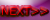
<style>
.page{position:relative;width:50px;height:20px}
.page>*{position:absolute;margin:0}
.t1{font:11px "Verdana"}
</style>
<div class="page">
<p class="t1" style="left:2px;top:7px;width:46px;height:8px">NEXT&gt;&gt;</p>
</div>
